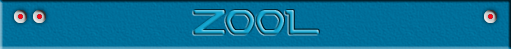
<style>
.page{position:relative;width:511px;height:49px}
.page>*{position:absolute;margin:0}
.t1{font:24px "Competitor";font-weight:bold}
</style>
<div class="page">
<p class="t1" style="left:193px;top:10px;width:126px;height:25px">ZOOL</p>
</div>
